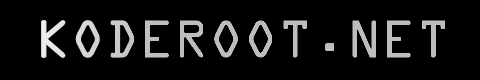
<style>
.page{position:relative;width:480px;height:80px;background:#000000}
.page>*{position:absolute;margin:0}
.t1{font:48px "OCRAStd";color:#bdbdbd}
.t2{font:12px "MyriadPro-Regular";color:#bdbdbd}
</style>
<div class="page">
<p class="t1" style="left:41px;top:20px;width:405px;height:38px"><span class="t2"><br></span> KODEROOT.NET</p>
</div>
